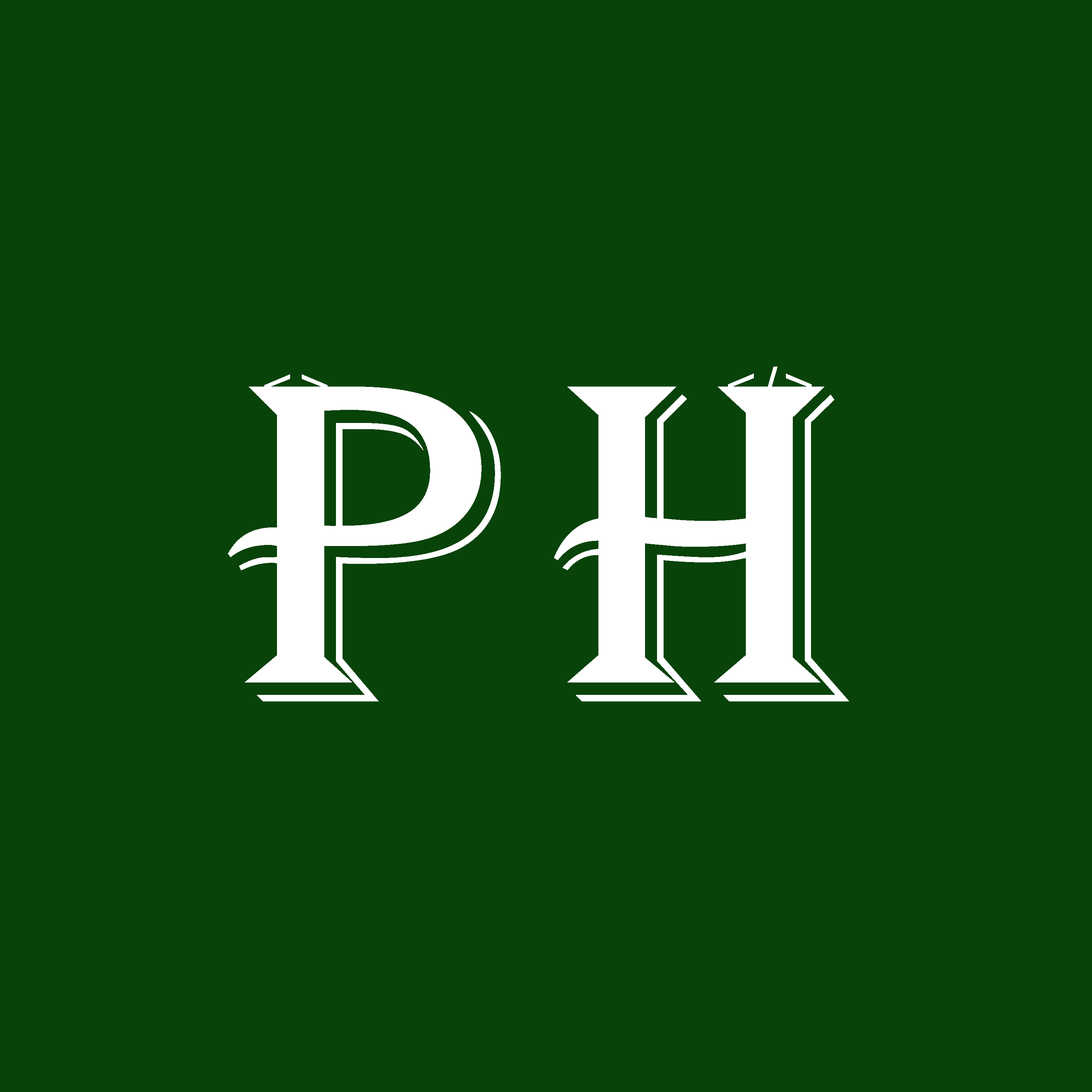
<style>
.page{position:relative;width:1092px;height:1092px;background:#08430a}
.page>*{position:absolute;margin:0}
.t1{font:54.6px "ArialMT";letter-spacing:0.1em;color:#ffffff}
.t2{font:471.7px "Algerian";letter-spacing:0.1em;color:#ffffff}
</style>
<div class="page">
<p class="t1" style="left:264px;top:374px;width:64px;height:26px">&lt;&gt;</p>
<p class="t1" style="left:728px;top:367px;width:84px;height:39px">&lt;/&gt;</p>
<p class="t2" style="left:228px;top:387px;width:621px;height:314px">PH</p>
</div>
